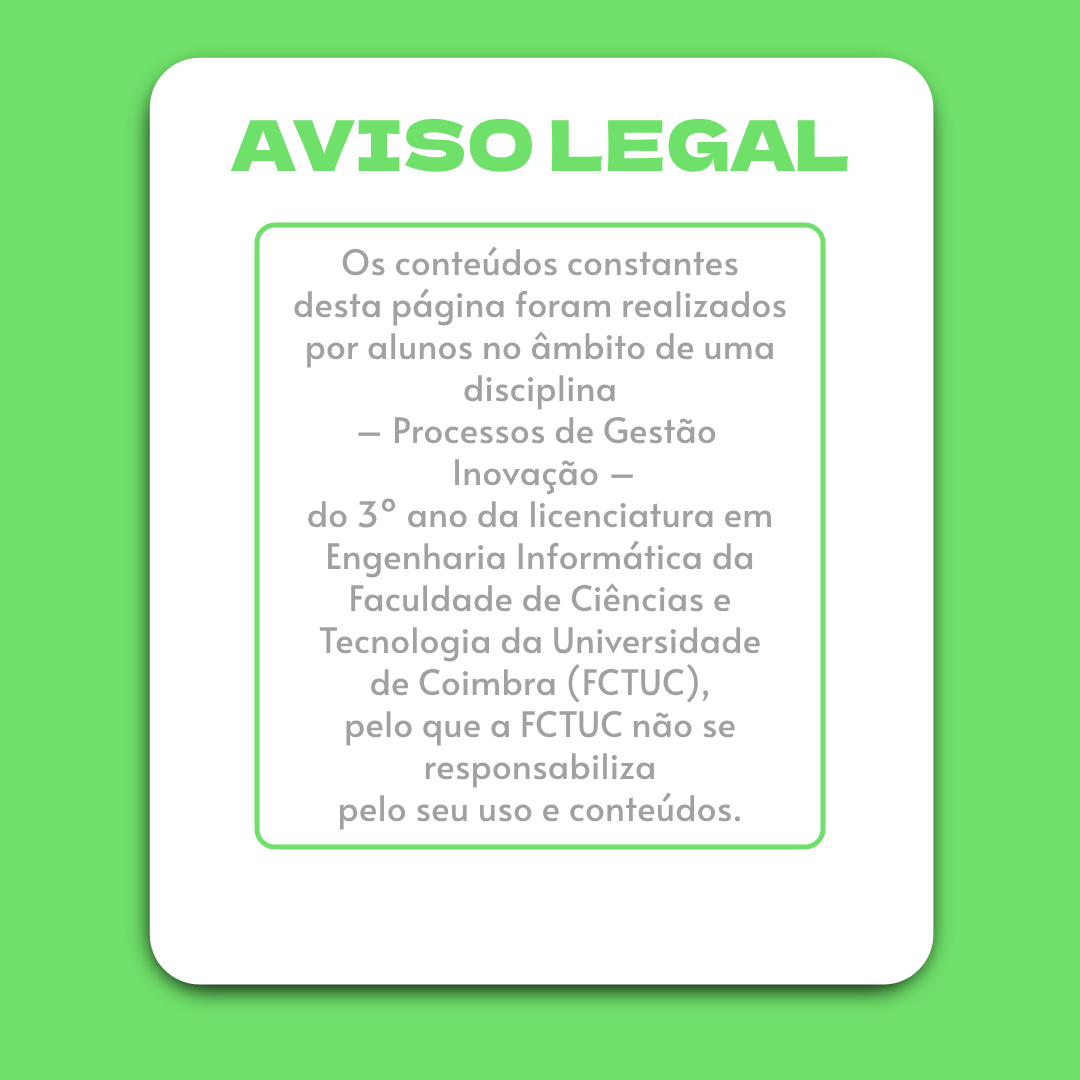
<style>
.page{position:relative;width:1080px;height:1080px;background:#ffffff}
.page>*{position:absolute;margin:0}
.t1{font:70px "DelaGothicOne-Regular";color:#6fe069}
.t2{font:35px "Alata-Regular";color:#a1a1a1}
</style>
<div class="page">
<p class="t1" style="left:230px;top:118px;width:619px;height:54px">AVISO LEGAL</p>
<p class="t2" style="left:294px;top:246px;width:492px;height:584px;text-align:center">Os conteúdos constantes<br>desta página foram realizados<br>por alunos no âmbito de uma<br>disciplina<br>– Processos de Gestão <br> Inovação –<br>do 3º ano da licenciatura em<br>Engenharia Informática da<br>Faculdade de Ciências e<br>Tecnologia da Universidade<br>de Coimbra (FCTUC),<br>pelo que a FCTUC não se<br>responsabiliza<br>pelo seu uso e conteúdos.</p>
</div>
